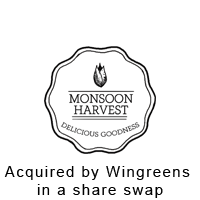
<style>
.page{position:relative;width:200px;height:200px;background:#ffffff}
.page>*{position:absolute;margin:0}
.t1{font:15px "ArialMT";letter-spacing:0.1em;color:#000000}
</style>
<div class="page">
<p class="t1" style="left:4px;top:166px;width:186px;height:32px;text-align:center">Acquired by Wingreens <br>in a share swap</p>
</div>
